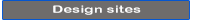
<style>
.page{position:relative;width:224px;height:20px;background:#6e6c6c}
.page>*{position:absolute;margin:0}
.t1{font:10.2px "ArialRoundedMTBold";color:#fcfcfc;scale:1.47 1}
</style>
<div class="page">
<p class="t1" style="left:53px;top:5px;width:88px;height:10px">Design sites</p>
</div>
